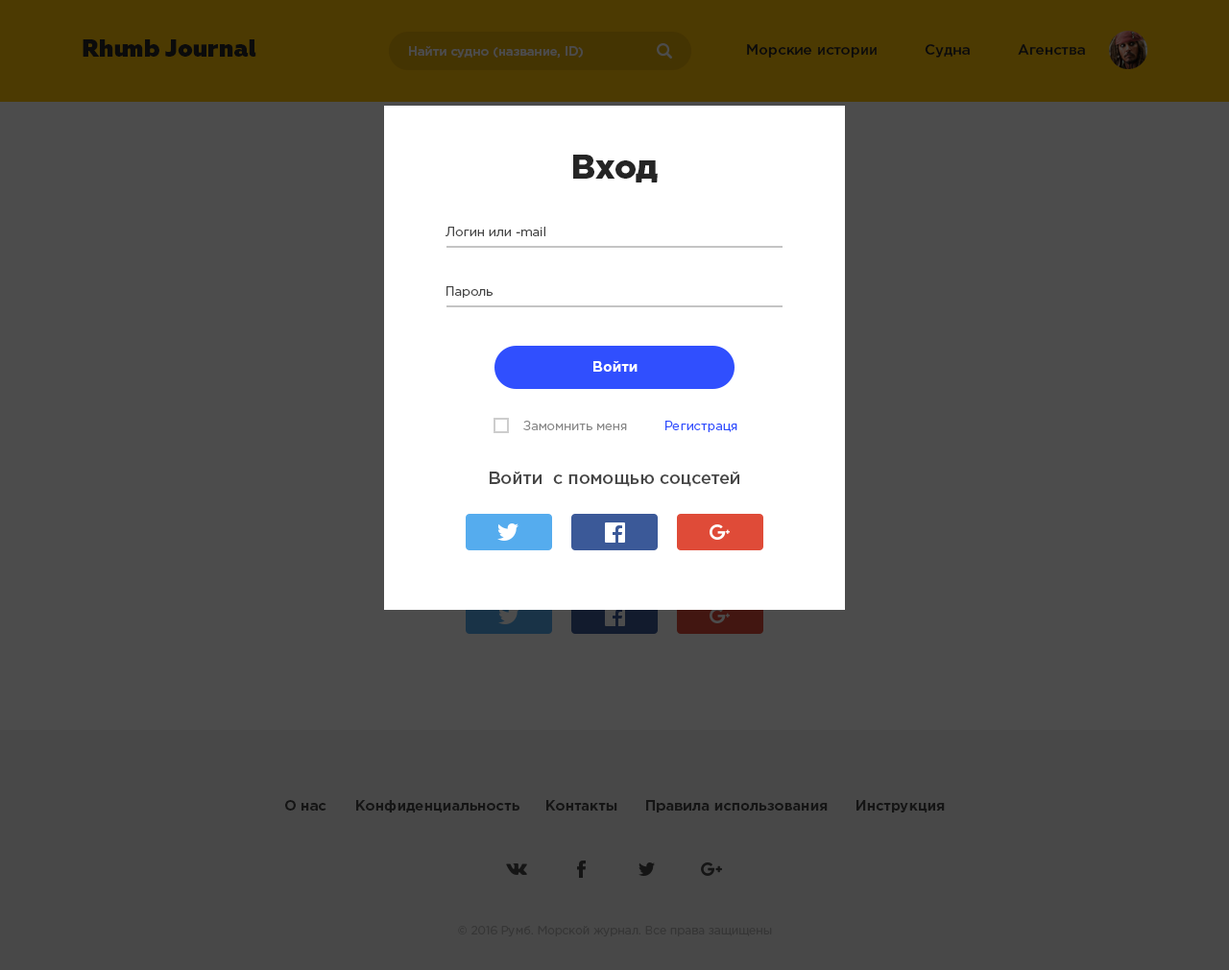
<style>
.page{position:relative;width:1229px;height:970px;background:#4c4c4c}
.page>*{position:absolute;margin:0}
.t1{font:24px "Geometria-Heavy";color:#0b0b0b}
.t2{font:12.5px "GothamPro-Medium";color:#4c4c4c}
.t3{font:14.4px "GothamPro-Medium";color:#0b0b0b}
.t4{font:33.6px "GothamPro-Black";color:#252525}
.t5{font:12.5px "GothamPro";color:#464646}
.t6{font:14.4px "GothamPro-Bold";color:#ffffff}
.t7{font:12.5px "GothamPro";color:#898989}
.t8{font:12.5px "GothamPro";color:#304ffe}
.t9{font:17.3px "GothamPro-Medium";color:#464646}
.t10{font:14.4px "GothamPro-Bold";color:#151515}
.t11{font:11.5px "GothamPro";color:#363636}
</style>
<div class="page">
<p class="t1" style="left:83px;top:39px;width:173px;height:18px">Rhumb Journal</p>
<p class="t2" style="left:409px;top:46px;width:174px;height:12px">Найти судно (название, ID)</p>
<p class="t3" style="left:747px;top:44px;width:130px;height:14px">Морские истории</p>
<p class="t3" style="left:925px;top:44px;width:45px;height:14px">Судна</p>
<p class="t3" style="left:1018px;top:44px;width:67px;height:11px">Агенства</p>
<p class="t4" style="left:573px;top:155px;width:85px;height:27px">Вход</p>
<p class="t5" style="left:445px;top:227px;width:101px;height:9px">Логин или -mail</p>
<p class="t5" style="left:447px;top:286px;width:46px;height:12px">Пароль</p>
<p class="t6" style="left:594px;top:361px;width:44px;height:11px">Войти</p>
<p class="t7" style="left:523px;top:421px;width:104px;height:9px">Замомнить меня</p>
<p class="t8" style="left:666px;top:421px;width:72px;height:11px">Регистраця</p>
<p class="t9" style="left:490px;top:472px;width:250px;height:15px">Войти  с помощью соцсетей</p>
<p class="t10" style="left:285px;top:800px;width:42px;height:11px">О нас</p>
<p class="t10" style="left:356px;top:800px;width:164px;height:12px">Конфиденциальность</p>
<p class="t10" style="left:546px;top:800px;width:72px;height:11px">Контакты</p>
<p class="t10" style="left:646px;top:800px;width:182px;height:12px">Правила использования</p>
<p class="t10" style="left:857px;top:800px;width:88px;height:12px">Инструкция</p>
<p class="t11" style="left:458px;top:926px;width:314px;height:11px">© 2016 Румб. Морской журнал. Все права защищены</p>
</div>
